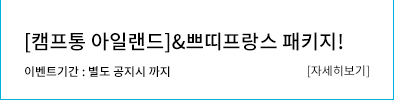
<style>
.page{position:relative;width:394px;height:100px;background:#ffffff}
.page>*{position:absolute;margin:0}
.t1{font:20px "NotoSansCJKkr-Medium";color:#000000}
.t2{font:12px "NotoSansCJKkr-Regular";color:#000000}
.t3{font:12px "NotoSansCJKkr-Medium";color:#000000}
</style>
<div class="page">
<p class="t1" style="left:26px;top:32px;width:317px;height:21px">[캠프통 아일랜드]&amp;쁘띠프랑스 패키지!</p>
<p class="t2" style="left:308px;top:65px;width:61px;height:13px">[자세히보기]</p>
<p class="t3" style="left:25px;top:66px;width:145px;height:11px">이벤트기간 : 별도 공지시 까지</p>
</div>
